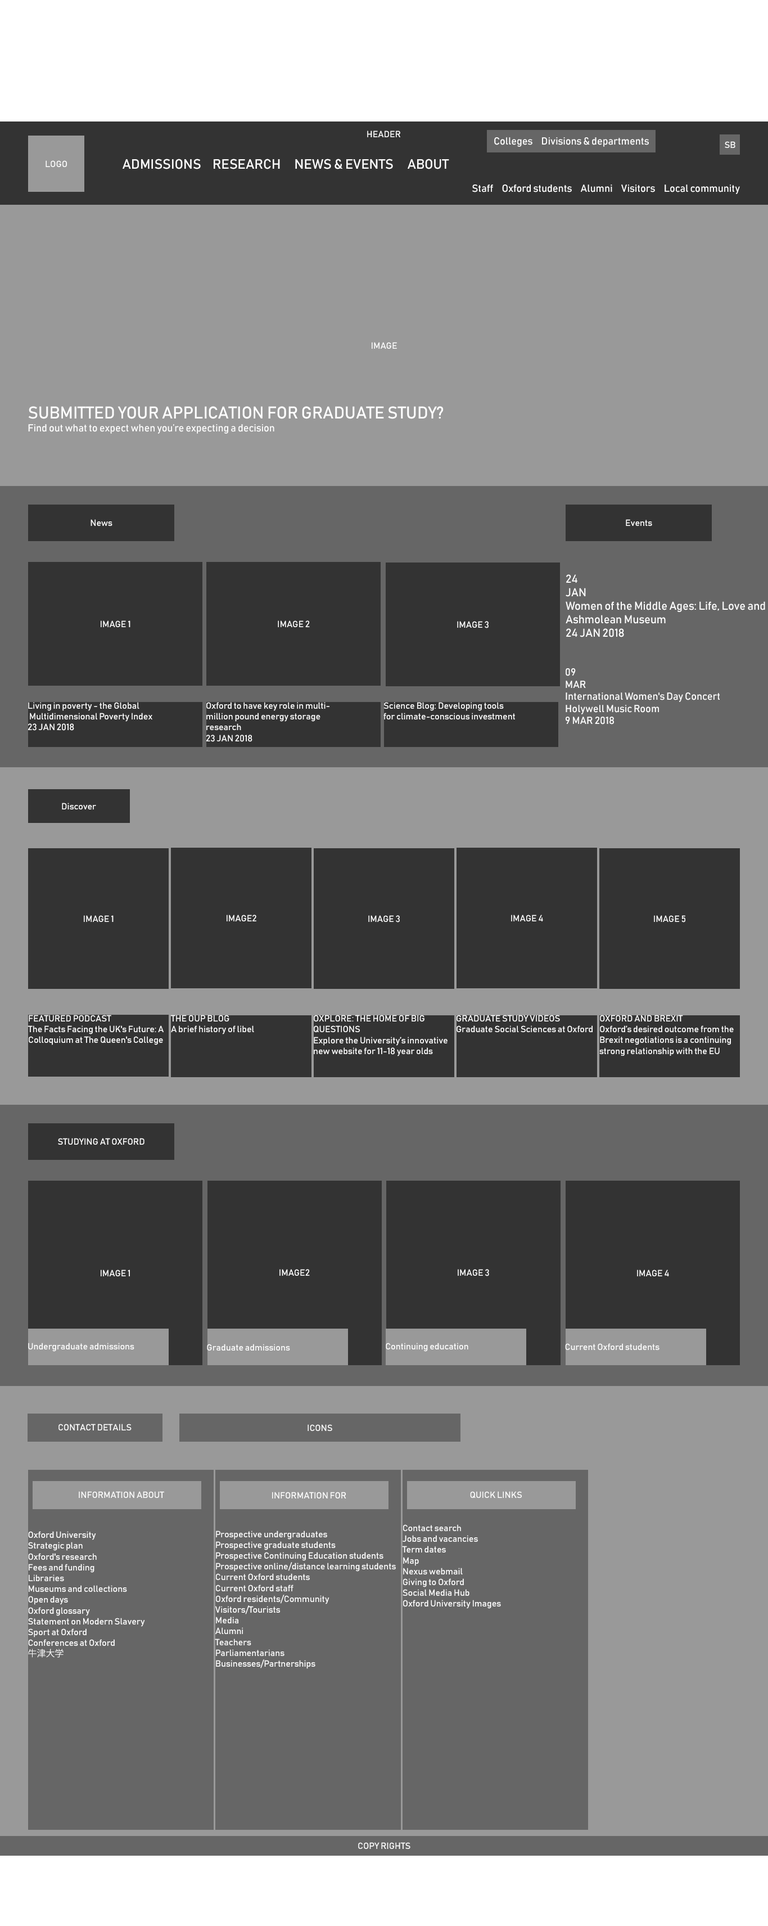
<style>
.page{position:relative;width:768px;height:1926px;background:#999999}
.page>*{position:absolute;margin:0}
.t1{font:9px "Bahnschrift";color:#ffffff}
.t2{font:10.1px "Bahnschrift";color:#ffffff}
.t3{font:13.5px "Bahnschrift";color:#ffffff}
.t4{font:16.9px "Bahnschrift";color:#ffffff}
.t5{font:9px "KozGoPr6N-Regular";color:#ffffff}
</style>
<div class="page">
<p class="t1" style="left:367px;top:130px;width:33px;height:7px">HEADER</p>
<p class="t2" style="left:494px;top:137px;width:155px;height:10px">Colleges     Divisions &amp; departments</p>
<p class="t1" style="left:725px;top:141px;width:11px;height:7px">SB</p>
<p class="t1" style="left:46px;top:160px;width:21px;height:7px">LOGO</p>
<p class="t3" style="left:123px;top:159px;width:326px;height:10px">ADMISSIONS     RESEARCH      NEWS &amp; EVENTS      ABOUT</p>
<p class="t2" style="left:472px;top:184px;width:268px;height:10px">Staff     Oxford students     Alumni     Visitors     Local community</p>
<p class="t1" style="left:372px;top:342px;width:25px;height:7px">IMAGE</p>
<p class="t4" style="left:28px;top:406px;width:416px;height:13px">SUBMITTED YOUR APPLICATION FOR GRADUATE STUDY?</p>
<p class="t2" style="left:28px;top:424px;width:246px;height:10px">Find out what to expect when you’re expecting a decision</p>
<p class="t1" style="left:91px;top:519px;width:21px;height:7px">News</p>
<p class="t1" style="left:626px;top:519px;width:26px;height:7px">Events</p>
<p class="t1" style="left:101px;top:620px;width:29px;height:7px">IMAGE 1</p>
<p class="t1" style="left:278px;top:620px;width:32px;height:7px">IMAGE 2</p>
<p class="t1" style="left:457px;top:621px;width:32px;height:7px">IMAGE 3</p>
<p class="t2" style="left:566px;top:668px;width:154px;height:56px">09<br>MAR<br>International Women's Day Concert<br>Holywell Music Room<br>9 MAR 2018</p>
<p class="t1" style="left:28px;top:702px;width:124px;height:29px">Living in poverty - the Global<br> Multidimensional Poverty Index<br>23 JAN 2018</p>
<p class="t1" style="left:206px;top:702px;width:124px;height:40px">Oxford to have key role in multi-<br>million pound energy storage <br>research<br>23 JAN 2018</p>
<p class="t1" style="left:384px;top:702px;width:131px;height:17px">Science Blog: Developing tools <br>for climate-conscious investment</p>
<p class="t1" style="left:62px;top:803px;width:34px;height:6px">Discover</p>
<p class="t1" style="left:84px;top:915px;width:30px;height:7px">IMAGE 1</p>
<p class="t1" style="left:227px;top:915px;width:29px;height:6px">IMAGE2</p>
<p class="t1" style="left:368px;top:915px;width:32px;height:7px">IMAGE 3</p>
<p class="t1" style="left:511px;top:915px;width:32px;height:6px">IMAGE 4</p>
<p class="t1" style="left:654px;top:915px;width:32px;height:7px">IMAGE 5</p>
<p class="t1" style="left:28px;top:1015px;width:136px;height:30px">FEATURED PODCAST<br>The Facts Facing the UK's Future: A <br>Colloquium at The Queen's College</p>
<p class="t1" style="left:170px;top:1015px;width:84px;height:19px">THE OUP BLOG<br>A brief history of libel</p>
<p class="t1" style="left:314px;top:1015px;width:134px;height:41px">OXPLORE: THE HOME OF BIG <br>QUESTIONS<br>Explore the University’s innovative <br>new website for 11-18 year olds</p>
<p class="t1" style="left:457px;top:1015px;width:136px;height:17px">GRADUATE STUDY VIDEOS<br>Graduate Social Sciences at Oxford</p>
<p class="t1" style="left:600px;top:1015px;width:134px;height:41px">OXFORD AND BREXIT<br>Oxford’s desired outcome from the <br>Brexit negotiations is a continuing <br>strong relationship with the EU</p>
<p class="t1" style="left:58px;top:1138px;width:87px;height:7px">STUDYING AT OXFORD</p>
<p class="t1" style="left:101px;top:1270px;width:29px;height:6px">IMAGE 1</p>
<p class="t1" style="left:280px;top:1269px;width:30px;height:7px">IMAGE2</p>
<p class="t1" style="left:458px;top:1269px;width:31px;height:7px">IMAGE 3</p>
<p class="t1" style="left:637px;top:1270px;width:32px;height:6px">IMAGE 4</p>
<p class="t1" style="left:28px;top:1343px;width:106px;height:9px">Undergraduate admissions</p>
<p class="t1" style="left:207px;top:1344px;width:83px;height:7px">Graduate admissions</p>
<p class="t1" style="left:386px;top:1343px;width:83px;height:9px">Continuing education</p>
<p class="t1" style="left:565px;top:1343px;width:95px;height:7px">Current Oxford students</p>
<p class="t1" style="left:58px;top:1424px;width:74px;height:6px">CONTACT DETAILS</p>
<p class="t1" style="left:308px;top:1424px;width:24px;height:7px">ICONS</p>
<p class="t1" style="left:79px;top:1491px;width:85px;height:7px">INFORMATION ABOUT</p>
<p class="t1" style="left:272px;top:1492px;width:74px;height:6px">INFORMATION FOR</p>
<p class="t1" style="left:470px;top:1491px;width:52px;height:7px">QUICK LINKS</p>
<p class="t1" style="left:402px;top:1524px;width:99px;height:85px">Contact search<br>Jobs and vacancies<br>Term dates<br>Map<br>Nexus webmail<br>Giving to Oxford<br>Social Media Hub<br>Oxford University Images</p>
<p class="t1" style="left:28px;top:1531px;width:117px;height:127px">Oxford University<br>Strategic plan<br>Oxford's research<br>Fees and funding<br>Libraries<br>Museums and collections<br>Open days<br>Oxford glossary<br>Statement on Modern Slavery<br>Sport at Oxford<br>Conferences at Oxford<br><span class="t5">牛津大学</span></p>
<p class="t1" style="left:215px;top:1531px;width:181px;height:138px">Prospective undergraduates<br>Prospective graduate students<br>Prospective Continuing Education students<br>Prospective online/distance learning students<br>Current Oxford students<br>Current Oxford staff<br>Oxford residents/Community<br>Visitors/Tourists<br>Media<br>Alumni<br>Teachers<br>Parliamentarians<br>Businesses/Partnerships</p>
<p class="t1" style="left:358px;top:1842px;width:53px;height:7px">COPY RIGHTS</p>
</div>
